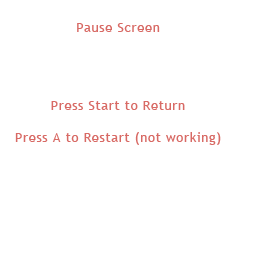
<style>
.page{position:relative;width:256px;height:256px;background:#ffffff}
.page>*{position:absolute;margin:0}
.t1{font:13px "TrebuchetMS";letter-spacing:0.05em;color:#d86a65}
</style>
<div class="page">
<p class="t1" style="left:77px;top:23px;width:83px;height:9px">Pause Screen</p>
<p class="t1" style="left:51px;top:101px;width:134px;height:9px">Press Start to Return</p>
<p class="t1" style="left:15px;top:132px;width:206px;height:13px">Press A to Restart (not working)</p>
</div>
